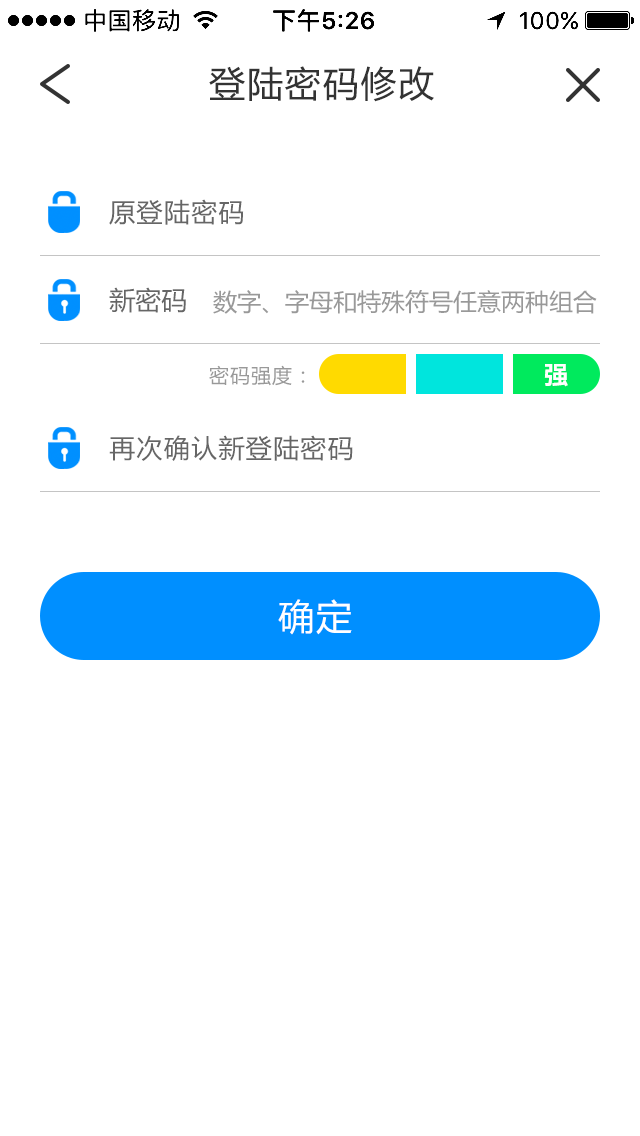
<style>
.page{position:relative;width:640px;height:1136px;background:#ffffff}
.page>*{position:absolute;margin:0}
.t1{font:36px "MicrosoftYaHei";letter-spacing:0.05em;color:#333333}
.t2{font:26px "MicrosoftYaHei";letter-spacing:0.05em;color:#666666}
.t3{font:26px "MicrosoftYaHei";color:#666666}
.t4{font:24px "MicrosoftYaHei";color:#999999}
.t5{font:20px "MicrosoftYaHei";letter-spacing:0.05em;color:#999999}
.t6{font:24px "MicrosoftYaHei-Bold";letter-spacing:0.05em;color:#ffffff}
.t7{font:36px "MicrosoftYaHei";letter-spacing:0.05em;color:#ffffff}
</style>
<div class="page">
<p class="t1" style="left:209px;top:66px;width:225px;height:36px">登陆密码修改</p>
<p class="t2" style="left:109px;top:199px;width:135px;height:26px">原登陆密码</p>
<p class="t3" style="left:109px;top:287px;width:77px;height:26px">新密码</p>
<p class="t4" style="left:213px;top:290px;width:384px;height:24px">数字、字母和特殊符号任意两种组合</p>
<p class="t5" style="left:209px;top:365px;width:96px;height:21px">密码强度：</p>
<p class="t6" style="left:544px;top:364px;width:24px;height:23px">强</p>
<p class="t2" style="left:109px;top:435px;width:244px;height:26px">再次确认新登陆密码</p>
<p class="t7" style="left:278px;top:599px;width:74px;height:36px">确定</p>
</div>
